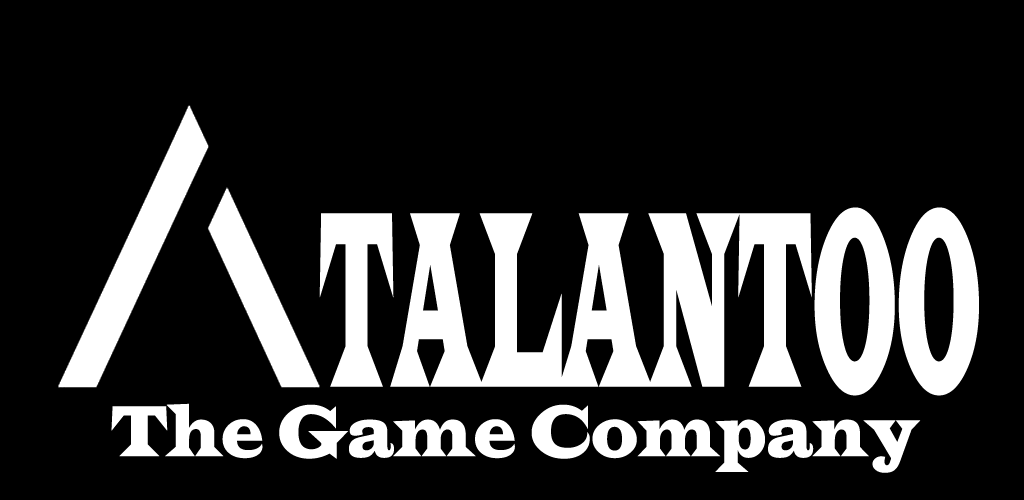
<style>
.page{position:relative;width:1024px;height:500px;background:#000000}
.page>*{position:absolute;margin:0}
.t1{font:260px "LatinWide";color:#ffffff;scale:0.24 1}
.t2{font:74.5px "LatinWide";color:#ffffff;scale:0.64 1}
</style>
<div class="page">
<p class="t1" style="left:319px;top:207px;width:660px;height:189px">TALANTOO</p>
<p class="t2" style="left:111px;top:403px;width:810px;height:70px">The Game Company</p>
</div>
